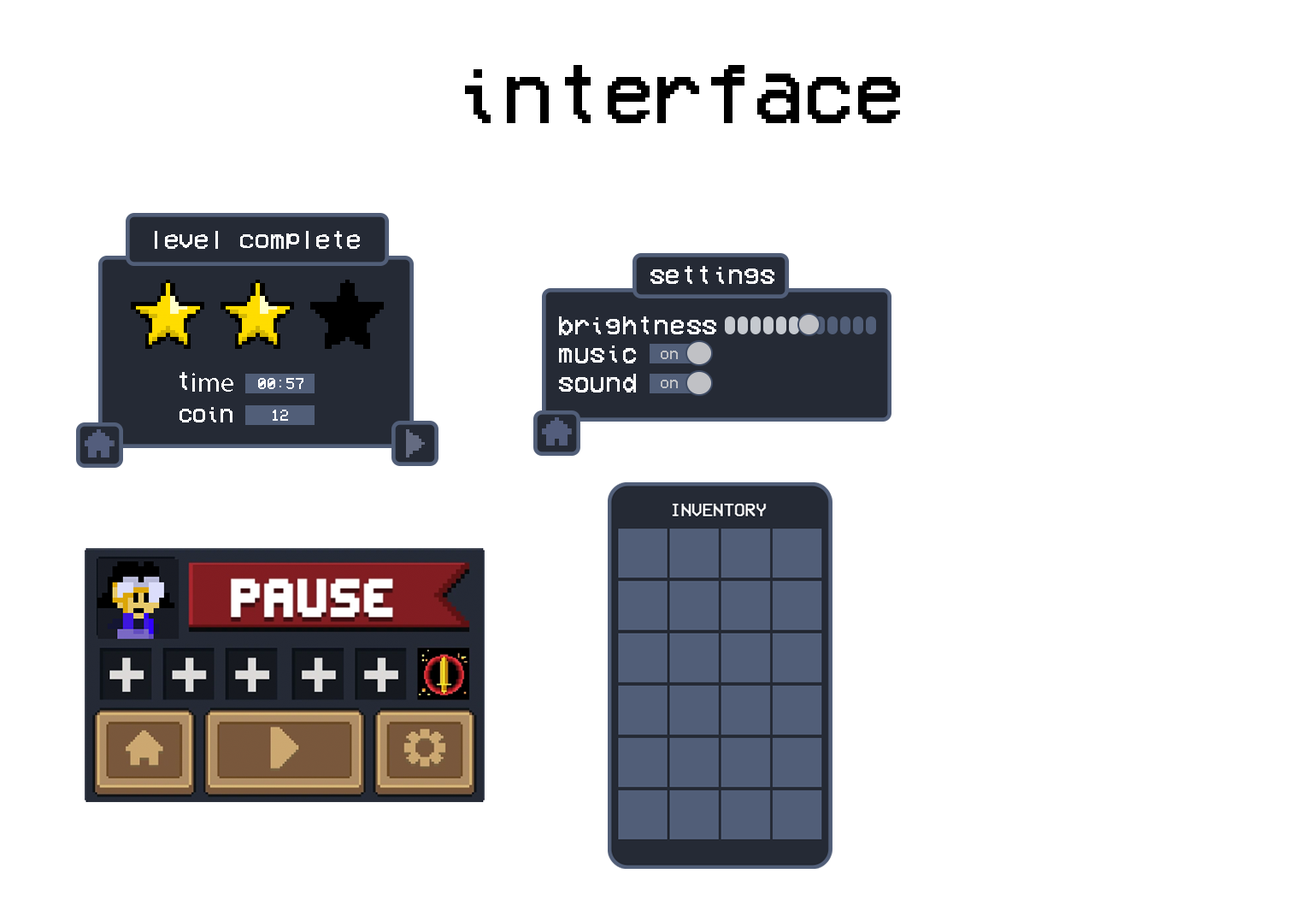
<style>
.page{position:relative;width:1312px;height:909px;background:#ffffff}
.page>*{position:absolute;margin:0}
.t1{font:85.5px "VCROSDMono";color:#000000}
.t2{font:25.9px "VCROSDMono";color:#ffffff}
.t3{font:27px "VCROSDMono";color:#ffffff}
.t4{font:27.3px "VCROSDMono";color:#ffffff}
.t5{font:16.4px "VCROSDMono";color:#c0c1c5}
.t6{font:27.3px "MyriadPro-Regular";color:#ffffff}
.t7{font:16.2px "VCROSDMono";color:#ffffff}
.t8{font:23.6px "VCROSDMono";color:#ffffff}
</style>
<div class="page">
<p class="t1" style="left:465px;top:65px;width:435px;height:58px">interface</p>
<p class="t2" style="left:155px;top:231px;width:205px;height:18px">level complete</p>
<p class="t3" style="left:651px;top:266px;width:124px;height:18px">settings</p>
<p class="t4" style="left:559px;top:316px;width:157px;height:19px">brightness</p>
<p class="t4" style="left:559px;top:345px;width:77px;height:18px">music</p>
<p class="t5" style="left:661px;top:350px;width:17px;height:9px">on</p>
<p class="t6" style="left:180px;top:372px;width:53px;height:20px"><span class="t4">t</span>ime</p>
<p class="t7" style="left:258px;top:378px;width:45px;height:11px">00:57</p>
<p class="t4" style="left:559px;top:374px;width:77px;height:18px">sound</p>
<p class="t5" style="left:661px;top:380px;width:17px;height:8px">on</p>
<p class="t8" style="left:180px;top:407px;width:53px;height:15px">coin</p>
<p class="t7" style="left:273px;top:409px;width:15px;height:12px">12</p>
</div>
